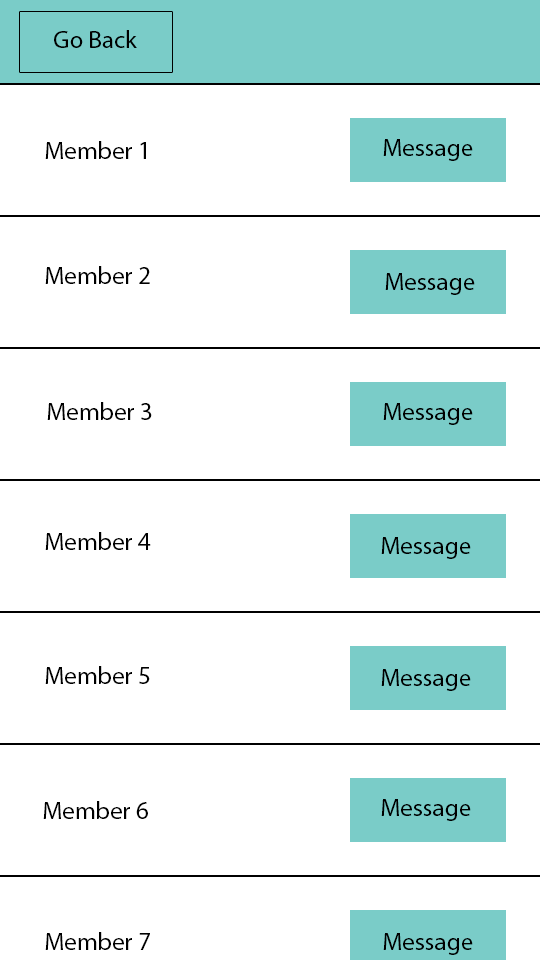
<style>
.page{position:relative;width:540px;height:960px;background:#ffffff}
.page>*{position:absolute;margin:0}
.t1{font:25px "MyriadPro-Regular";color:#000000}
</style>
<div class="page">
<p class="t1" style="left:54px;top:30px;width:83px;height:18px">Go Back</p>
<p class="t1" style="left:45px;top:141px;width:101px;height:18px">Member 1</p>
<p class="t1" style="left:383px;top:139px;width:90px;height:22px">Message</p>
<p class="t1" style="left:45px;top:266px;width:105px;height:18px">Member 2</p>
<p class="t1" style="left:385px;top:273px;width:90px;height:22px">Message</p>
<p class="t1" style="left:47px;top:402px;width:105px;height:18px">Member 3</p>
<p class="t1" style="left:383px;top:403px;width:90px;height:22px">Message</p>
<p class="t1" style="left:45px;top:532px;width:106px;height:18px">Member 4</p>
<p class="t1" style="left:381px;top:537px;width:90px;height:22px">Message</p>
<p class="t1" style="left:45px;top:666px;width:105px;height:18px">Member 5</p>
<p class="t1" style="left:381px;top:669px;width:90px;height:22px">Message</p>
<p class="t1" style="left:43px;top:801px;width:105px;height:18px">Member 6</p>
<p class="t1" style="left:381px;top:799px;width:90px;height:22px">Message</p>
<p class="t1" style="left:45px;top:932px;width:105px;height:18px">Member 7</p>
<p class="t1" style="left:383px;top:933px;width:90px;height:22px">Message</p>
</div>
